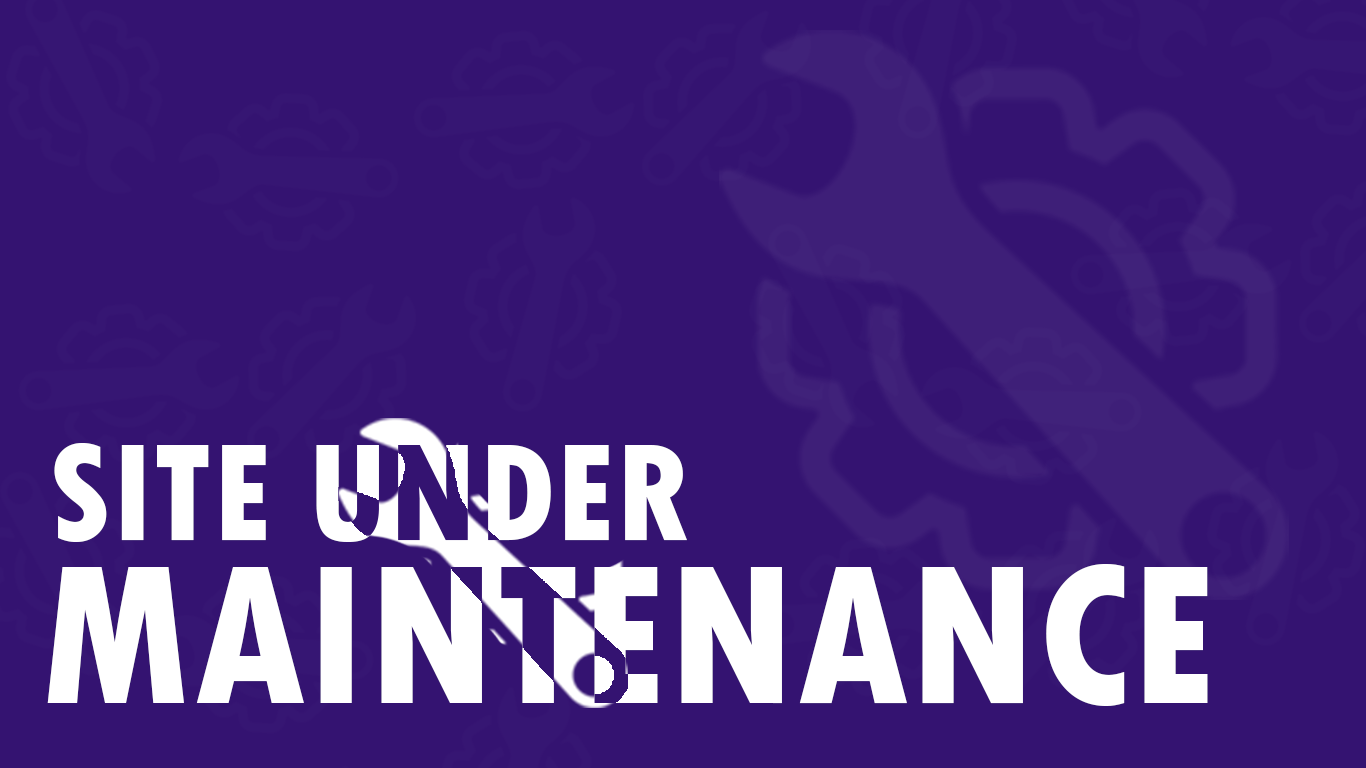
<style>
.page{position:relative;width:1366px;height:768px;background:#341371}
.page>*{position:absolute;margin:0}
.t1{font:144.8px "TwCenMT-CondensedExtraBold";color:#ffffff}
.t2{font:209.3px "TwCenMT-CondensedExtraBold";color:#ffffff}
</style>
<div class="page">
<p class="t1" style="left:54px;top:443px;width:633px;height:99px">SITE UNDER</p>
<p class="t2" style="left:47px;top:564px;width:1161px;height:142px">MAINTENANCE</p>
</div>
